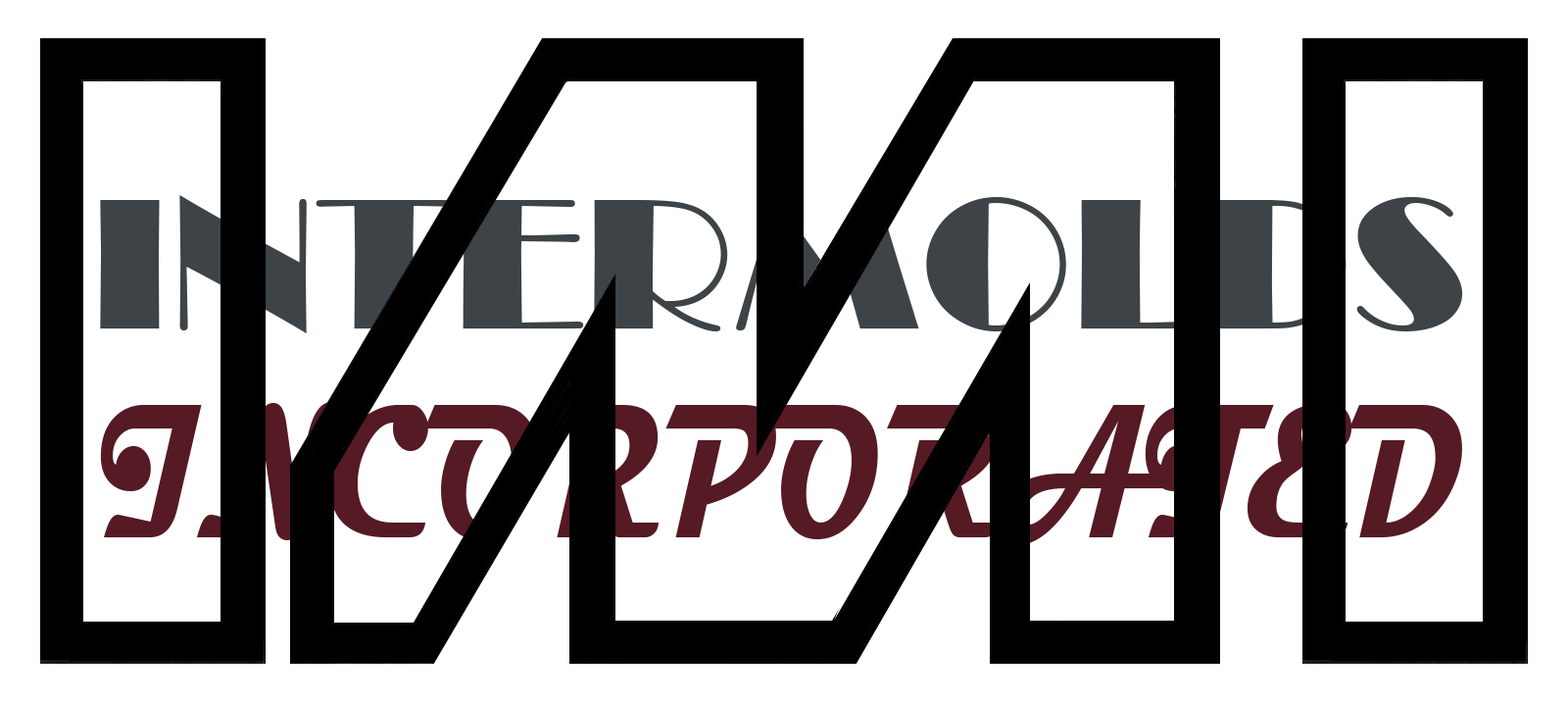
<style>
.page{position:relative;width:1568px;height:702px;background:#ffffff}
.page>*{position:absolute;margin:0}
.t1{font:192.3px "Broadway";color:#3d4347}
.t2{font:192.3px "Magneto-Bold";color:#551a24;scale:0.69 1}
</style>
<div class="page">
<p class="t1" style="left:100px;top:195px;width:1363px;height:138px">INTERMOLDS</p>
<p class="t2" style="left:100px;top:402px;width:1362px;height:143px">INCORPORATED</p>
</div>
